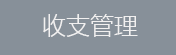
<style>
.page{position:relative;width:176px;height:55px;background:#879099}
.page>*{position:absolute;margin:0}
.t1{font:24px "MicrosoftYaHeiLight";color:#f1f0f0}
</style>
<div class="page">
<p class="t1" style="left:43px;top:14px;width:95px;height:23px">收支管理</p>
</div>
